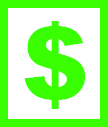
<style>
.page{position:relative;width:108px;height:127px;background:#ffffff}
.page>*{position:absolute;margin:0}
.t1{font:100px "Arial-Black";color:#39ff02}
</style>
<div class="page">
<p class="t1" style="left:24px;top:21px;width:62px;height:88px">$</p>
</div>
